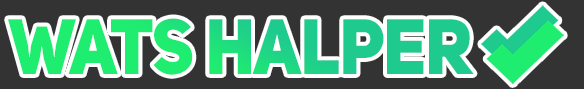
<style>
.page{position:relative;width:584px;height:89px;background:#333333}
.page>*{position:absolute;margin:0}
.t1{font:77.2px "UniSansHeavyCAPS";letter-spacing:-0.02em;color:#1fd981;scale:0.96 1}
</style>
<div class="page">
<p class="t1" style="left:8px;top:18px;width:466px;height:57px">Wats Halper</p>
</div>
